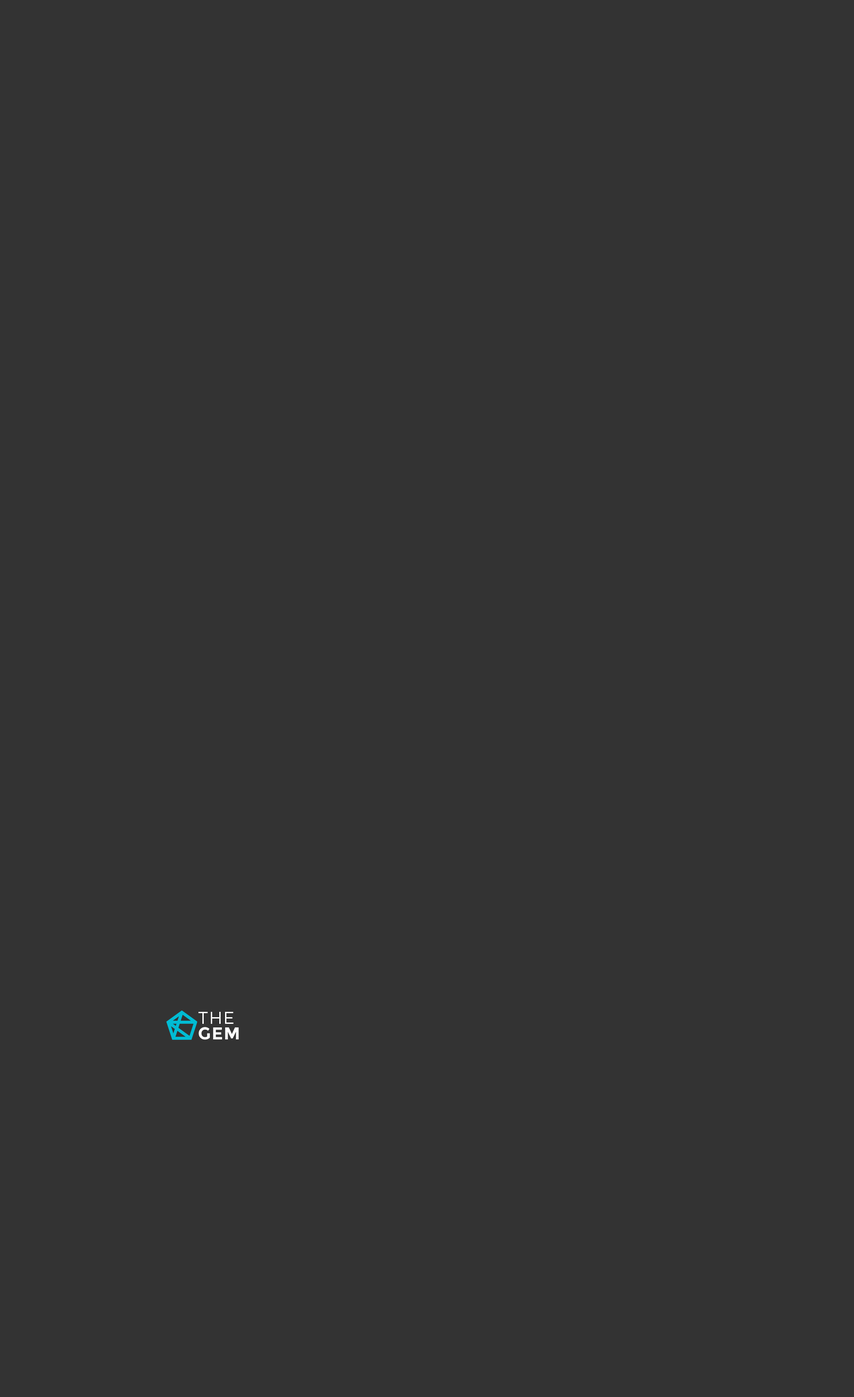
<style>
.page{position:relative;width:854px;height:1397px;background:#333333}
.page>*{position:absolute;margin:0}
.t1{font:17.2px/15.9px "Montserrat-Light";letter-spacing:0.05em;color:#ffffff;text-transform:uppercase}
.t2{font:17.2px/15.9px "Montserrat-Bold";letter-spacing:0.05em;color:#ffffff;text-transform:uppercase}
</style>
<div class="page">
<p class="t1" style="left:198px;top:1012px;width:41px;height:28px">the<br><span class="t2">gem</span></p>
</div>
